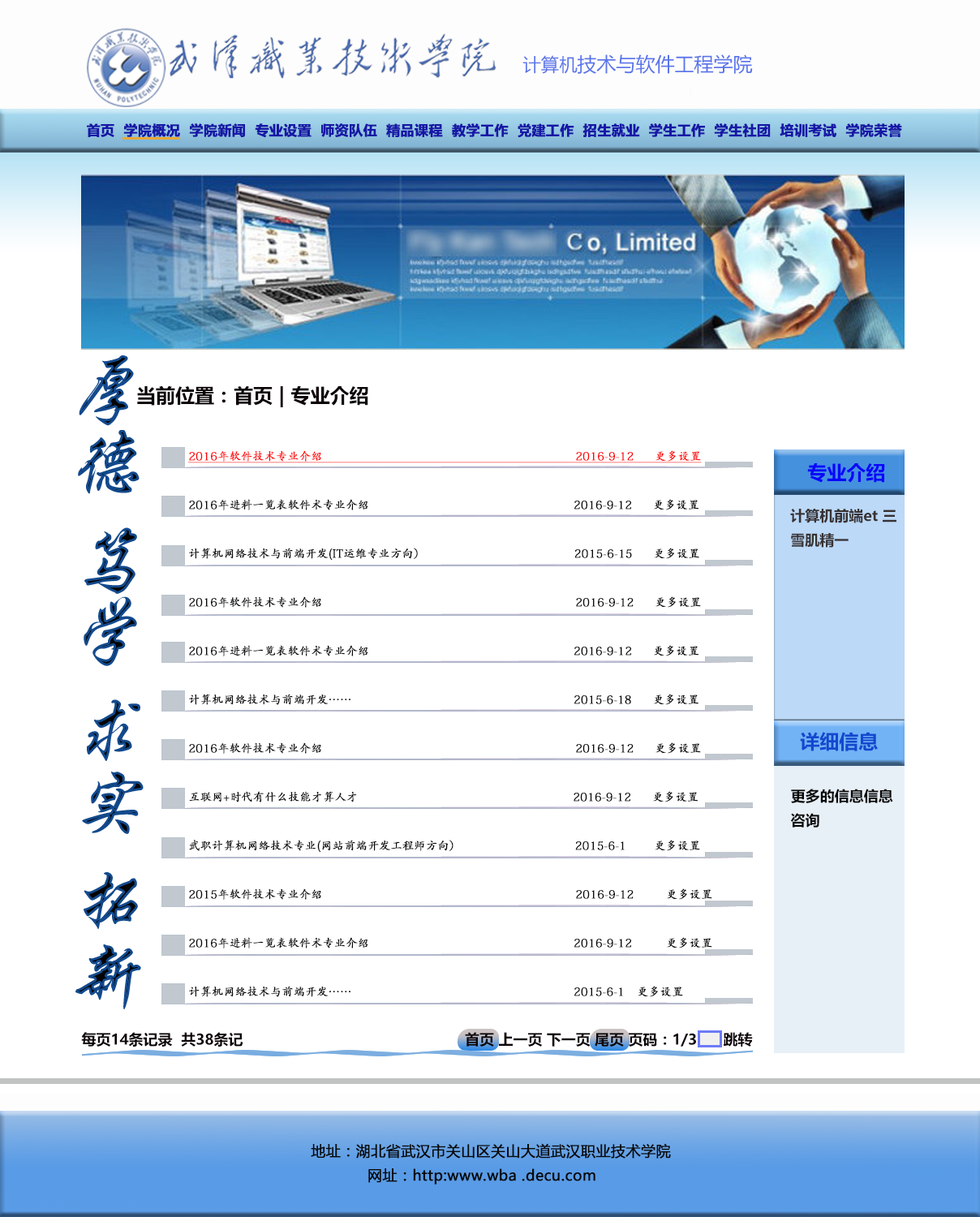
<style>
.page{position:relative;width:980px;height:1217px;background:#ffffff}
.page>*{position:absolute;margin:0}
.t1{font:19.5px "MicrosoftYaHei";color:#5a75ea}
.t2{font:18.1px "MicrosoftYaHei";color:#5a75ea}
.t3{font:13.8px "MicrosoftYaHei-Bold";color:#1717a6;font-weight:bold}
.t4{font:19.5px "MicrosoftYaHei-Bold";color:#0c0407}
.t5{font:11.4px/24.3px "AdobeKaitiStd-Regular";color:#fe0404;font-weight:bold;text-decoration:underline}
.t6{font:11.4px/24.3px "AdobeKaitiStd-Regular";color:#08080a;font-weight:bold}
.t7{font:11.4px/24.3px "AdobeKaitiStd-Regular";color:#010101;font-weight:bold}
.t8{font:19.5px "MicrosoftYaHei-Bold";color:#0a04fd}
.t9{font:14.6px/24.3px "MicrosoftYaHei-Bold";color:#383234}
.t10{font:19.5px "MicrosoftYaHei-Bold";color:#1348cf}
.t11{font:14.6px/24.3px "MicrosoftYaHei-Bold";color:#070707}
.t12{font:14.6px "MicrosoftYaHei-Bold";color:#0c0407}
.t13{font:14.6px/24.3px "MicrosoftYaHei";color:#090909;font-weight:bold}
</style>
<div class="page">
<p class="t1" style="left:522px;top:54px;width:231px;height:20px"><span class="t2">计算机</span>技术与软件工程学院</p>
<p class="t3" style="left:87px;top:123px;width:815px;height:15px">首页  学院概况  学院新闻  专业设置  师资队伍  精品课程  教学工作  党建工作  招生就业  学生工作  学生社团  培训考试  学院荣誉</p>
<p class="t4" style="left:137px;top:385px;width:231px;height:22px">当前位置：首页 | 专业介绍</p>
<p class="t5" style="left:188px;top:450px;width:524px;height:547px">2016年软件技术专业介绍                                                                         2016-9-12      更多设置<br><span class="t6"><br>2016年进料一览表软件术专业介绍                                                           2016-9-12      </span><span class="t7">更多设置<br></span><span class="t6"><br>计算机网络技术与前端开发(IT运维专业方向）                                           2015-6-15      </span><span class="t7">更多设置<br><br></span><span class="t6">2016年软件技术专业介绍                                                                         2016-9-12      </span><span class="t7">更多设置<br></span><span class="t6"><br>2016年进料一览表软件术专业介绍                                                           2016-9-12      </span><span class="t7">更多设置<br></span><span class="t6"><br>计算机网络技术与前端开发……                                                                2015-6-18      </span><span class="t7">更多设置<br><br></span><span class="t6">2016年软件技术专业介绍                                                                         2016-9-12      </span><span class="t7">更多设置<br></span><span class="t6"><br>互联网+时代有什么技能才算人才                                                              2016-9-12      </span><span class="t7">更多设置<br></span><span class="t6"><br>武职计算机网络技术专业(网站前端开发工程师方向）                                 2015-6-1        </span><span class="t7">更多设置<br><br></span><span class="t6">2015年软件技术专业介绍                                                                         2016-9-12      </span><span class="t7">更多设置<br></span><span class="t6"><br>2016年进料一览表软件术专业介绍                                                           2016-9-12    </span><span class="t7">更多设置<br></span><span class="t6"><br>计算机网络技术与前端开发……                                                                2015-6-1    </span><span class="t7">更多设置</span></p>
<p class="t8" style="left:807px;top:463px;width:78px;height:20px">专业介绍</p>
<p class="t9" style="left:790px;top:509px;width:106px;height:39px">计算机前端et 三<br>雪肌精一</p>
<p class="t10" style="left:800px;top:732px;width:78px;height:19px">详细信息</p>
<p class="t11" style="left:790px;top:789px;width:103px;height:38px">更多的信息信息<br>咨询</p>
<p class="t12" style="left:81px;top:1032px;width:672px;height:14px">每页14条记录  共38条记                                                   首页 上一页 下一页 尾页 页码：1/3      跳转</p>
<p class="t13" style="left:311px;top:1143px;width:360px;height:41px">地址：湖北省武汉市关山区关山大道武汉职业技术学院<br>            网址：http:www.wba .decu.com</p>
</div>
